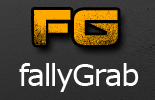
<style>
.page{position:relative;width:155px;height:100px}
.page>*{position:absolute;margin:0}
.t1{font:49px "Coalition";letter-spacing:0.025em;color:#ffa800}
.t2{font:30px "Verdana";letter-spacing:-0.06em;color:#ffffff}
</style>
<div class="page">
<p class="t1" style="left:34px;top:10px;width:84px;height:36px">FG</p>
<p class="t2" style="left:19px;top:63px;width:120px;height:29px">fallyGrab</p>
</div>
